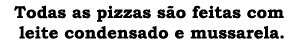
<style>
.page{position:relative;width:300px;height:50px;background:#ffffff}
.page>*{position:absolute;margin:0}
.t1{font:17px "BookmanOldStyle-Bold";color:#000000}
</style>
<div class="page">
<p class="t1" style="left:14px;top:5px;width:270px;height:34px;text-align:center">Todas as pizzas são feitas com <br>leite condensado e mussarela.</p>
</div>
